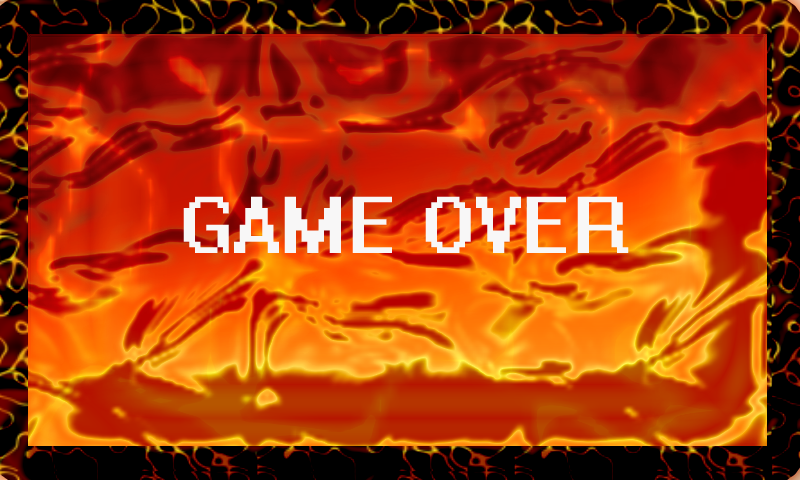
<style>
.page{position:relative;width:800px;height:480px}
.page>*{position:absolute;margin:0}
.t1{font:72px "System";color:#f8f7f7}
</style>
<div class="page">
<p class="t1" style="left:183px;top:196px;width:446px;height:57px">GAME OVER</p>
</div>
